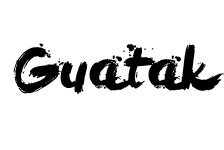
<style>
.page{position:relative;width:224px;height:150px;background:#ffffff}
.page>*{position:absolute;margin:0}
.t1{font:60px "LeviReBrushed";color:#000000}
</style>
<div class="page">
<p class="t1" style="left:13px;top:43px;width:211px;height:52px">Guatak</p>
</div>
